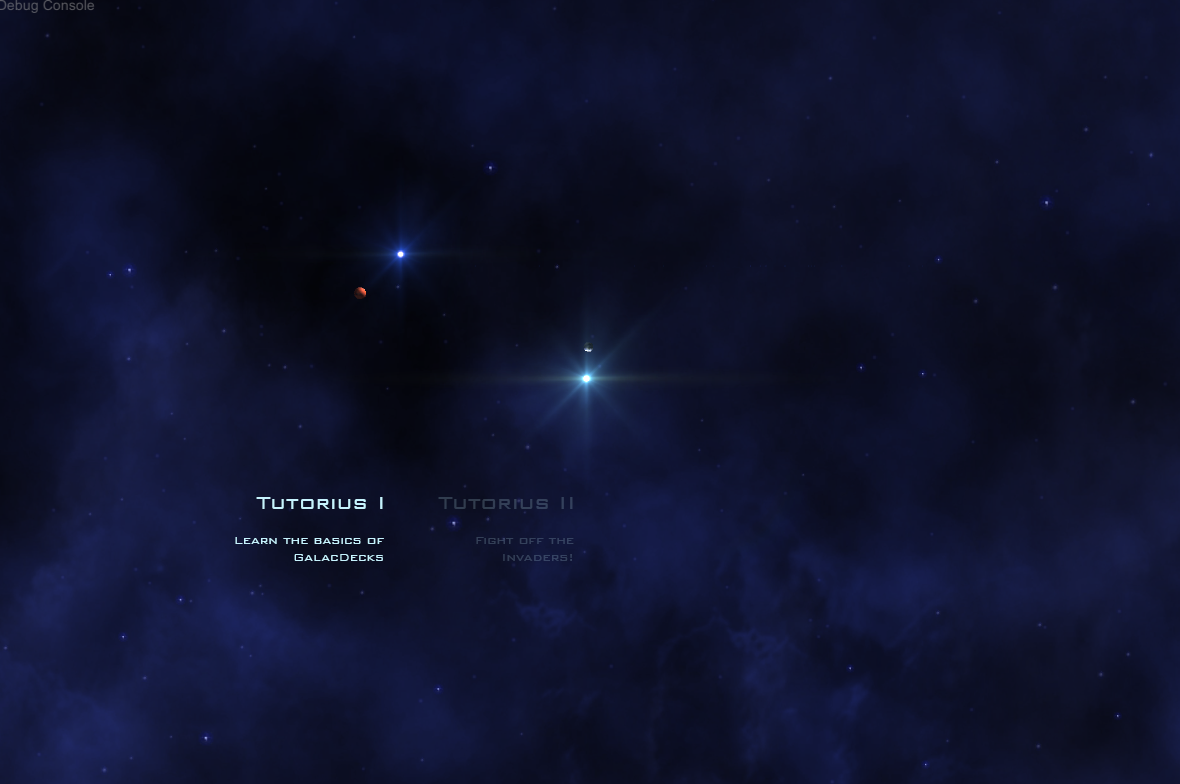
<style>
.page{position:relative;width:1180px;height:784px}
.page>*{position:absolute;margin:0}
.t1{font:24px "BankGothicBT-Light";color:#c6f3fe}
.t2{font:24px "BankGothicBT-Light";color:#333f56}
.t3{font:14px "BankGothicBT-Light";color:#c6f3fe}
.t4{font:14px "BankGothicBT-Light";color:#34415e}
</style>
<div class="page">
<p class="t1" style="left:256px;top:497px;width:127px;height:12px">Tutorius I</p>
<p class="t2" style="left:438px;top:497px;width:135px;height:12px">Tutorius II</p>
<p class="t3" style="left:235px;top:537px;width:149px;height:24px;text-align:right">Learn the basics of<br>GalacDecks</p>
<p class="t4" style="left:476px;top:537px;width:98px;height:24px;text-align:right">Fight off the<br>Invaders!</p>
</div>
